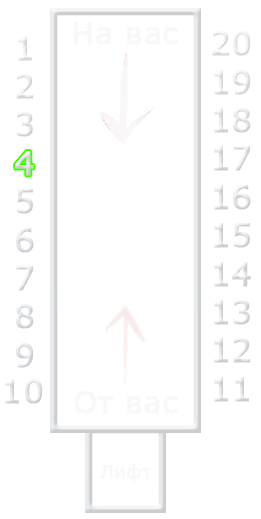
<style>
.page{position:relative;width:261px;height:519px;background:#ffffff}
.page>*{position:absolute;margin:0}
.t1{font:30px "Verdana";color:#f9f7f7;font-weight:bold}
.t2{font:32px "Verdana";color:#e2e5e7;font-weight:bold}
.t3{font:32px "Verdana";color:#e0e2e5;font-weight:bold}
.t4{font:32px "Verdana";font-weight:bold}
.t5{font:18px "Verdana";color:#f9f7f7;font-weight:bold}
</style>
<div class="page">
<p class="t1" style="left:73px;top:22px;width:105px;height:23px">На вас</p>
<p class="t2" style="left:15px;top:36px;width:19px;height:332px;text-align:right">1<br>2<br>3<br><br>5<br>6<br>7<br>8<br>9</p>
<p class="t3" style="left:212px;top:31px;width:39px;height:371px;text-align:right">20<br>19<br>18<br>17<br>16<br>15<br>14<br>13<br>12<br>11</p>
<p class="t4" style="left:15px;top:151px;width:19px;height:25px">4</p>
<p class="t2" style="left:5px;top:379px;width:38px;height:25px">10</p>
<p class="t1" style="left:74px;top:391px;width:104px;height:23px">От вас</p>
<p class="t5" style="left:100px;top:464px;width:52px;height:19px">Лифт</p>
</div>
